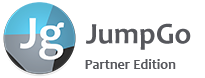
<style>
.page{position:relative;width:205px;height:78px;background:#ffffff}
.page>*{position:absolute;margin:0}
.t1{font:30px "Candara-Bold";color:#56575c}
.t2{font:14px "Candara-Bold";color:#56575c}
</style>
<div class="page">
<p class="t1" style="left:86px;top:23px;width:105px;height:27px">JumpGo</p>
<p class="t2" style="left:85px;top:59px;width:91px;height:10px">Partner Edition</p>
</div>
